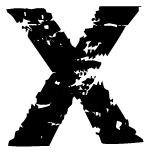
<style>
.page{position:relative;width:151px;height:154px;background:#ffffff}
.page>*{position:absolute;margin:0}
.t1{font:139.7px "Destroy";color:#000000;font-weight:bold}
</style>
<div class="page">
<p class="t1" style="left:6px;top:6px;width:138px;height:141px">X</p>
</div>
